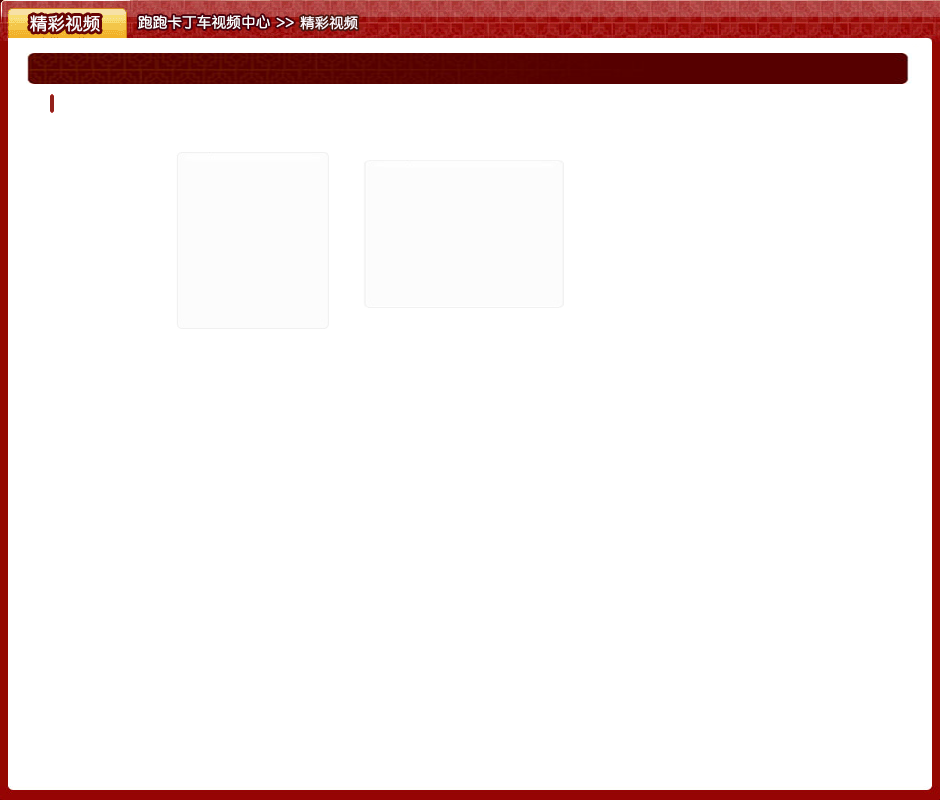
<style>
.page{position:relative;width:940px;height:800px;background:#ffffff}
.page>*{position:absolute;margin:0}
.t1{font:17.6px "Tensentype-JiaLiZhongYuanJ";color:#fcfcfc}
.t2{font:14.7px "Tensentype-JiaLiZhongYuanJ";color:#fcfcfc}
.t3{font:16.5px "Tensentype-JiaLiZhongYuanJ";color:#fcf7fb;scale:0.76 1}
.t4{font:14.5px "Tensentype-JiaLiZhongYuanJ";color:#fcf6fa}
</style>
<div class="page">
<p class="t1" style="left:30px;top:15px;width:70px;height:17px">精彩视频</p>
<p class="t2" style="left:138px;top:15px;width:132px;height:14px">跑跑卡丁车视频中心</p>
<p class="t3" style="left:276px;top:17px;width:9px;height:11px">&gt;</p>
<p class="t3" style="left:285px;top:17px;width:9px;height:11px">&gt;</p>
<p class="t4" style="left:300px;top:16px;width:58px;height:14px">精彩视频</p>
</div>
